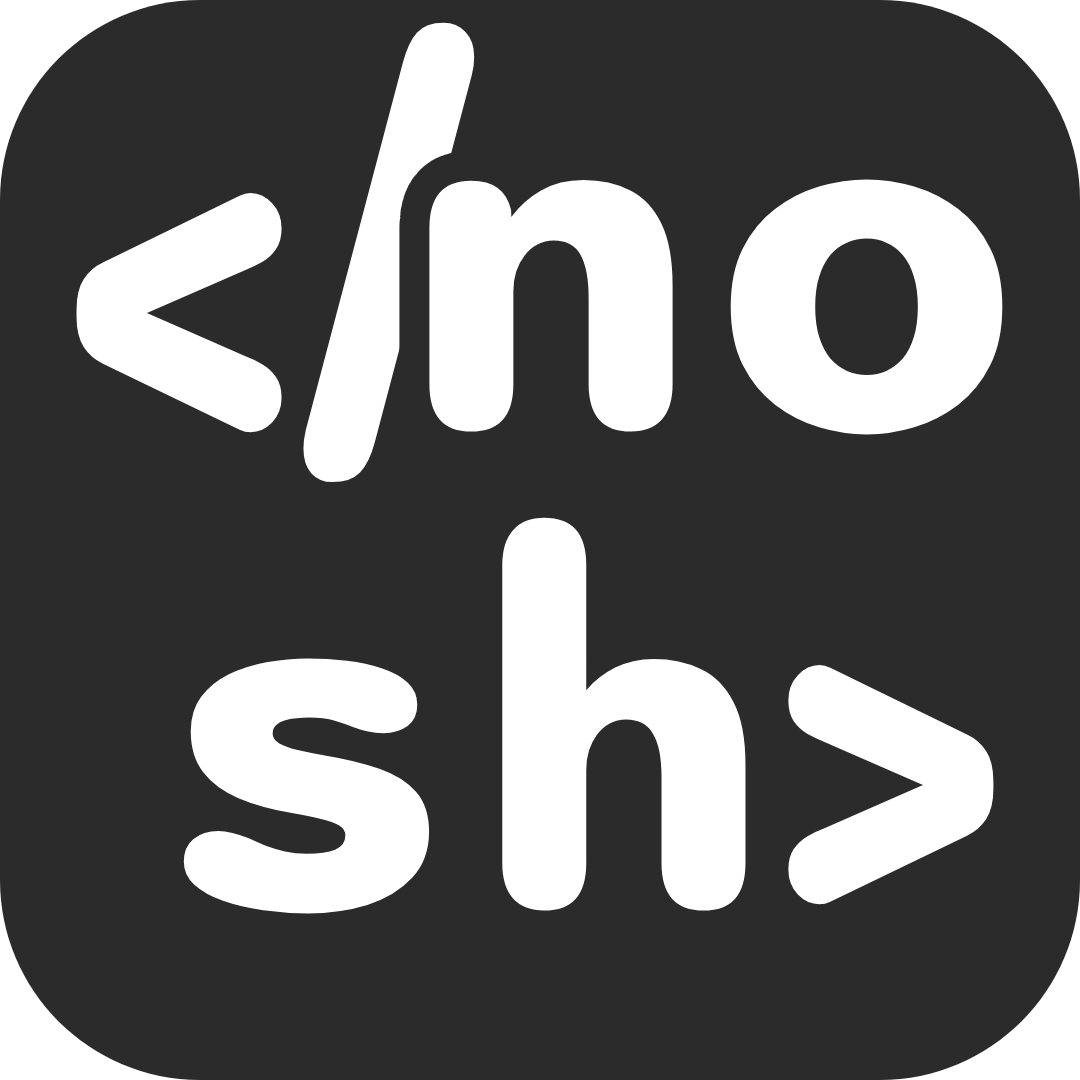
<style>
.page{position:relative;width:1080px;height:1080px;background:#2b2b2b}
.page>*{position:absolute;margin:0}
.t1{font:512px "SonoMonospace-Bold";color:#ffffff}
</style>
<div class="page">
<p class="t1" style="left:303px;top:22px;width:172px;height:461px">/</p>
<p class="t1" style="left:429px;top:179px;width:574px;height:256px">no</p>
<p class="t1" style="left:76px;top:192px;width:206px;height:241px">&lt;</p>
<p class="t1" style="left:183px;top:517px;width:563px;height:397px">sh</p>
<p class="t1" style="left:788px;top:664px;width:206px;height:241px">&gt;</p>
</div>
